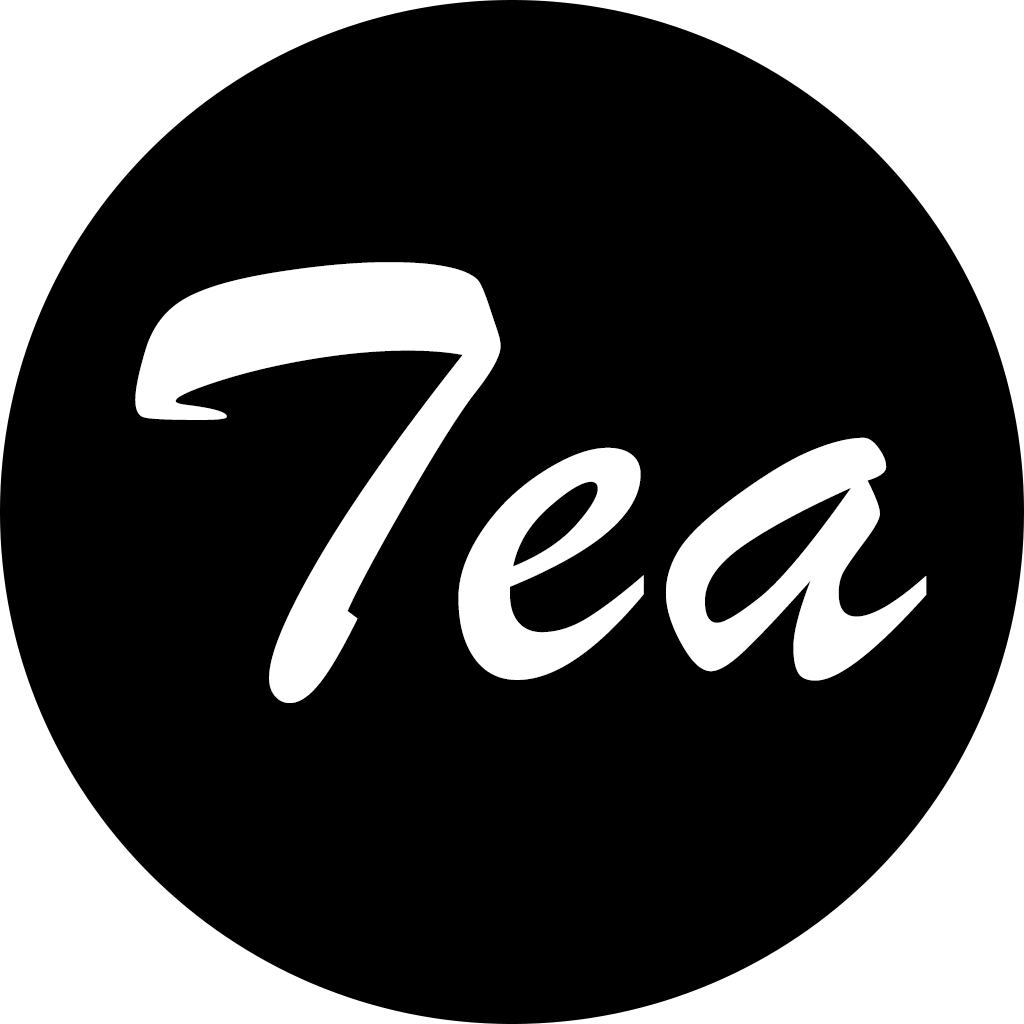
<style>
.page{position:relative;width:1024px;height:1024px;background:#000000}
.page>*{position:absolute;margin:0}
.t1{font:625px "STXingkai";color:#ffffff}
</style>
<div class="page">
<p class="t1" style="left:135px;top:262px;width:792px;height:441px">Tea</p>
</div>
